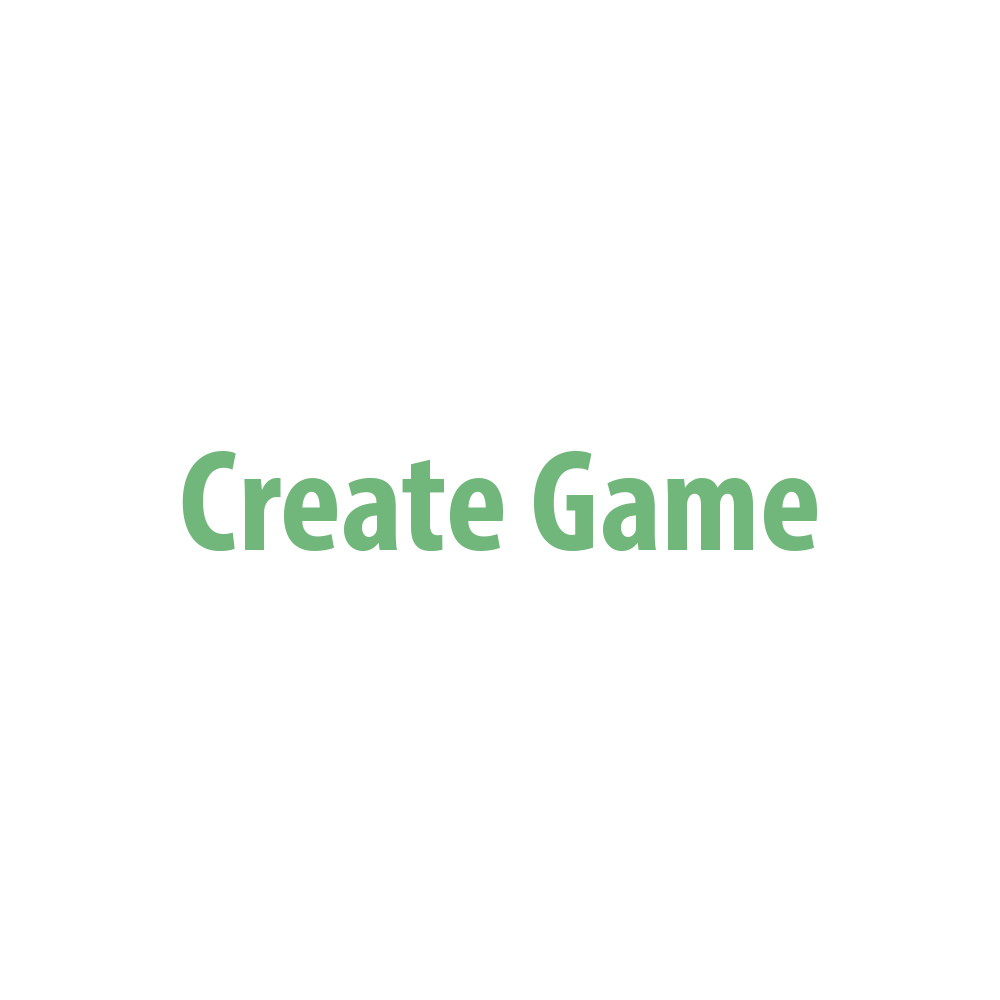
<style>
.page{position:relative;width:1000px;height:1000px;background:#ffffff}
.page>*{position:absolute;margin:0}
.t1{font:145.7px "MyriadPro-BoldCond";color:#71b67b}
</style>
<div class="page">
<p class="t1" style="left:182px;top:450px;width:635px;height:102px">Create Game</p>
</div>
